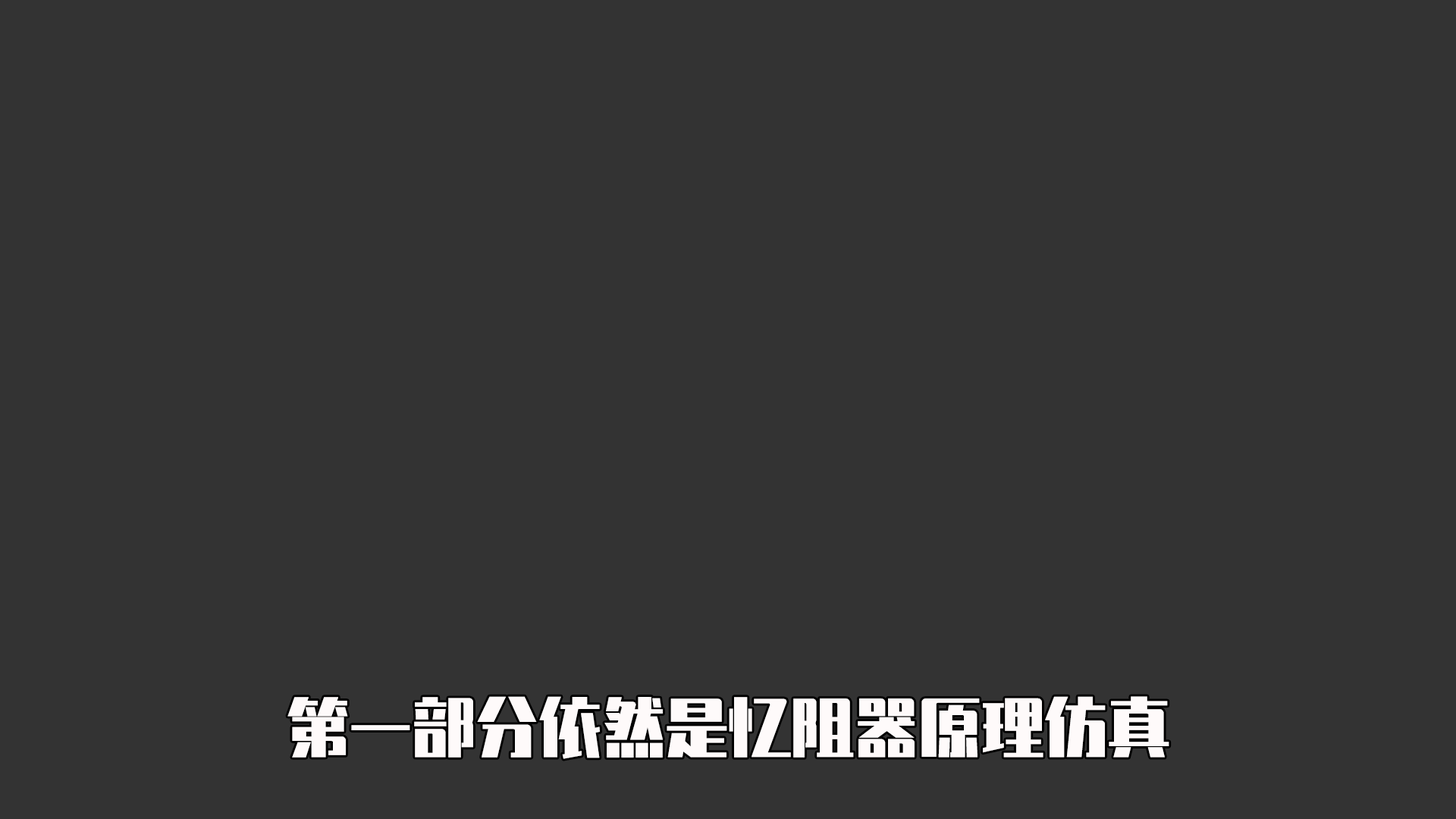
<style>
.page{position:relative;width:1456px;height:819px;background:#333333}
.page>*{position:absolute;margin:0}
.t1{font:63.2px "ZhenyanGB-Regular";color:#fefafa}
</style>
<div class="page">
<p class="t1" style="left:287px;top:696px;width:882px;height:63px">第一部分依然是忆阻器原理仿真</p>
</div>
